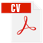
<style>
.page{position:relative;width:43px;height:43px;background:#f1f1f1}
.page>*{position:absolute;margin:0}
.t1{font:11px "BebasNeue-Regular";letter-spacing:0.075em;color:#ffffff}
</style>
<div class="page">
<p class="t1" style="left:11px;top:4px;width:10px;height:8px">CV</p>
</div>
